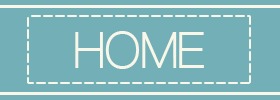
<style>
.page{position:relative;width:280px;height:100px;background:#73afb6}
.page>*{position:absolute;margin:0}
.t1{font:50px "Aliquam";color:#f9f7ea}
</style>
<div class="page">
<p class="t1" style="left:75px;top:31px;width:129px;height:38px">HOME</p>
<p class="t1" style="left:75px;top:31px;width:129px;height:38px">HOME</p>
<p class="t1" style="left:75px;top:31px;width:129px;height:38px">HOME</p>
</div>
